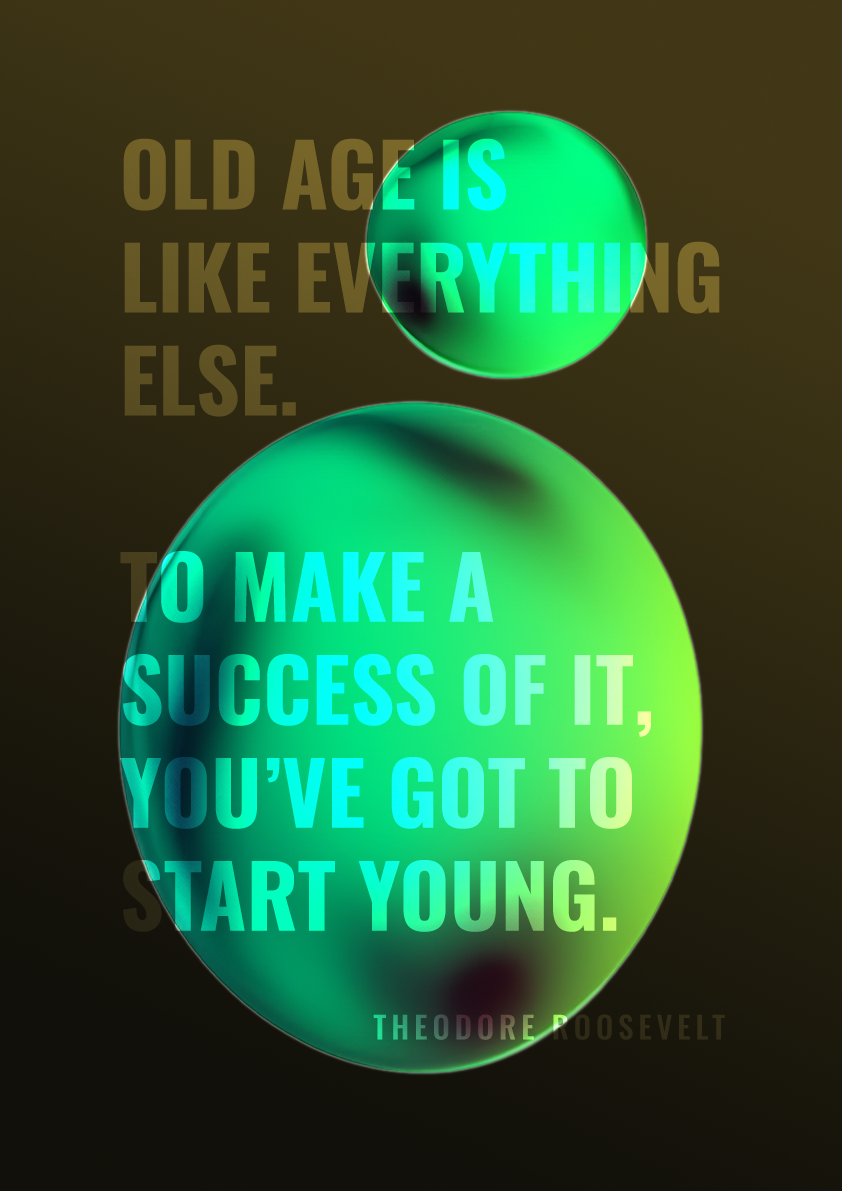
<style>
.page{position:relative;width:842px;height:1191px}
.page>*{position:absolute;margin:0}
.t1{font:86.3px/103px "Oswald-Bold";text-transform:uppercase}
.t2{font:30.8px "Oswald-Medium";letter-spacing:0.16em;text-transform:uppercase}
</style>
<div class="page">
<p class="t1" style="left:120px;top:138px;width:600px;height:794px">Old age is <br>like everything else. <br><br>To make a success of it, you’ve got to start young.</p>
<p class="t2" style="left:373px;top:1014px;width:352px;height:26px">Theodore Roosevelt</p>
</div>
